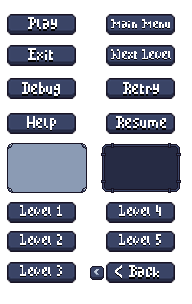
<style>
.page{position:relative;width:192px;height:304px;background:#ffffff}
.page>*{position:absolute;margin:0}
.t1{font:13.5px "MinimalPixel2";color:#ffffff}
.t2{font:11.5px "MinimalPixel2";scale:0.96 1}
.t3{font:11.5px "MinimalPixel2";color:#ffffff;scale:0.96 1}
.t4{font:11.6px "MinimalPixel2";scale:0.92 1}
.t5{font:11.6px "MinimalPixel2";color:#ffffff;scale:0.92 1}
.t6{font:12.7px "MinimalPixel2";scale:0.91 1}
.t7{font:12.7px "MinimalPixel2";color:#ffffff;scale:0.91 1}
.t8{font:22.3px "Geometric706BT-BlackCondensedB";color:#ffffff;scale:0.58 1}
</style>
<div class="page">
<p class="t1" style="left:28px;top:17px;width:29px;height:12px">Play</p>
<p class="t2" style="left:111px;top:20px;width:59px;height:9px">Main Menu</p>
<p class="t3" style="left:111px;top:19px;width:59px;height:9px">Main Menu</p>
<p class="t1" style="left:28px;top:48px;width:25px;height:12px">Exit</p>
<p class="t4" style="left:111px;top:50px;width:60px;height:10px">Next Level</p>
<p class="t5" style="left:111px;top:49px;width:60px;height:10px">Next Level</p>
<p class="t1" style="left:22px;top:82px;width:38px;height:14px">Debug</p>
<p class="t1" style="left:123px;top:82px;width:36px;height:12px">Retry</p>
<p class="t1" style="left:27px;top:117px;width:29px;height:14px">Help</p>
<p class="t1" style="left:27px;top:116px;width:29px;height:14px">Help</p>
<p class="t1" style="left:116px;top:116px;width:50px;height:12px">Resume</p>
<p class="t6" style="left:20px;top:206px;width:42px;height:11px">Level 1</p>
<p class="t7" style="left:20px;top:205px;width:42px;height:11px">Level 1</p>
<p class="t7" style="left:119px;top:206px;width:42px;height:11px">Level 4</p>
<p class="t7" style="left:119px;top:205px;width:42px;height:11px">Level 4</p>
<p class="t6" style="left:20px;top:235px;width:42px;height:11px">Level 2</p>
<p class="t7" style="left:20px;top:234px;width:42px;height:11px">Level 2</p>
<p class="t6" style="left:119px;top:235px;width:42px;height:11px">Level 5</p>
<p class="t7" style="left:119px;top:234px;width:42px;height:11px">Level 5</p>
<p class="t6" style="left:20px;top:266px;width:42px;height:11px">Level 3</p>
<p class="t7" style="left:20px;top:265px;width:42px;height:11px">Level 3</p>
<p class="t8" style="left:115px;top:265px;width:7px;height:13px">&lt;</p>
<p class="t1" style="left:129px;top:265px;width:30px;height:12px">Back</p>
</div>
